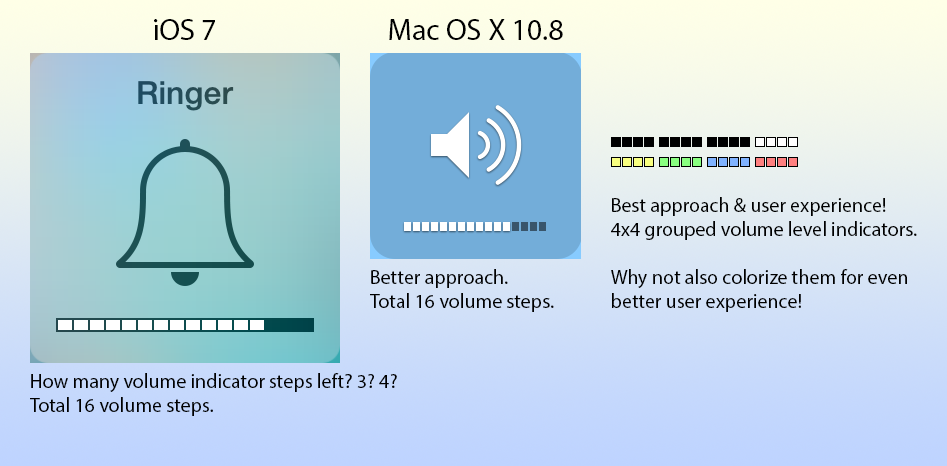
<style>
.page{position:relative;width:947px;height:466px}
.page>*{position:absolute;margin:0}
.t1{font:30px "MyriadPro-Regular";color:#000000}
.t2{font:20px "MyriadPro-Regular";color:#000000}
</style>
<div class="page">
<p class="t1" style="left:154px;top:19px;width:61px;height:21px">iOS 7</p>
<p class="t1" style="left:389px;top:19px;width:174px;height:21px">Mac OS X 10.8</p>
<p class="t2" style="left:611px;top:197px;width:306px;height:115px">Best approach &amp; user experience!<br>4x4 grouped volume level indicators.<br><br>Why not also colorize them for even<br>better user experience!</p>
<p class="t2" style="left:370px;top:269px;width:184px;height:43px">Better approach.<br>Total 16 volume steps.</p>
<p class="t2" style="left:30px;top:373px;width:367px;height:43px">How many volume indicator steps left? 3? 4?<br>Total 16 volume steps.</p>
</div>
